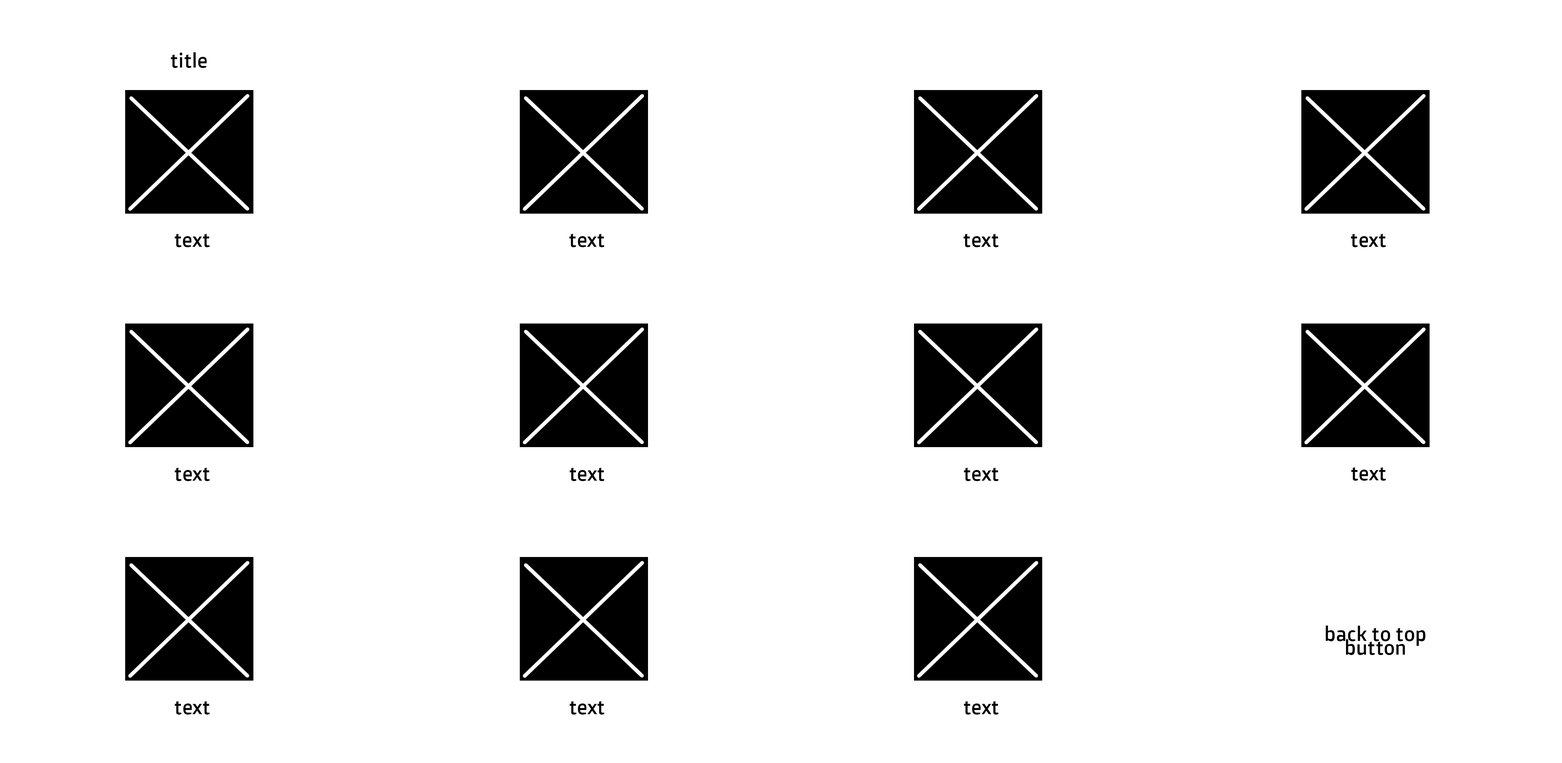
<style>
.page{position:relative;width:1562px;height:763px;background:#ffffff}
.page>*{position:absolute;margin:0}
.t1{font:20.1px "DoppioOne-Regular";color:#000000;scale:0.96 1}
</style>
<div class="page">
<p class="t1" style="left:171px;top:52px;width:36px;height:16px">title</p>
<p class="t1" style="left:175px;top:234px;width:35px;height:13px">text</p>
<p class="t1" style="left:569px;top:234px;width:36px;height:13px">text</p>
<p class="t1" style="left:964px;top:234px;width:35px;height:13px">text</p>
<p class="t1" style="left:1351px;top:234px;width:35px;height:13px">text</p>
<p class="t1" style="left:175px;top:468px;width:35px;height:13px">text</p>
<p class="t1" style="left:570px;top:468px;width:35px;height:13px">text</p>
<p class="t1" style="left:964px;top:468px;width:35px;height:13px">text</p>
<p class="t1" style="left:1351px;top:468px;width:35px;height:13px">text</p>
<p class="t1" style="left:1326px;top:626px;width:100px;height:29px">back to top button</p>
<p class="t1" style="left:175px;top:701px;width:35px;height:14px">text</p>
<p class="t1" style="left:570px;top:701px;width:35px;height:14px">text</p>
<p class="t1" style="left:964px;top:701px;width:35px;height:14px">text</p>
</div>
